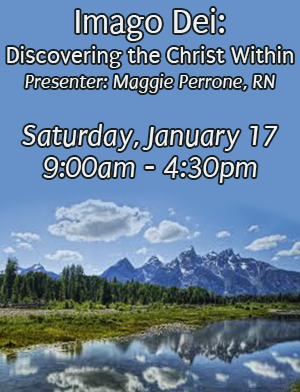
<style>
.page{position:relative;width:300px;height:392px;background:#6692c9}
.page>*{position:absolute;margin:0}
.t1{font:30px/32px "Puritan-Italic";color:#eef1f4}
.t2{font:35px/30px "Puritan-Regular";color:#eef1f4}
.t3{font:24px/30px "Puritan-Regular";color:#eef1f4}
.t4{font:20px/25px "Puritan-Italic";color:#eef1f4}
</style>
<div class="page">
<p class="t1" style="left:7px;top:8px;width:286px;height:175px;text-align:center"><span class="t2">Imago Dei: <br></span><span class="t3">Discovering the Christ Within<br></span><span class="t4">Presenter: Maggie Perrone, RN<br><br></span>Saturday, January 17<br>9:00am - 4:30pm</p>
</div>
